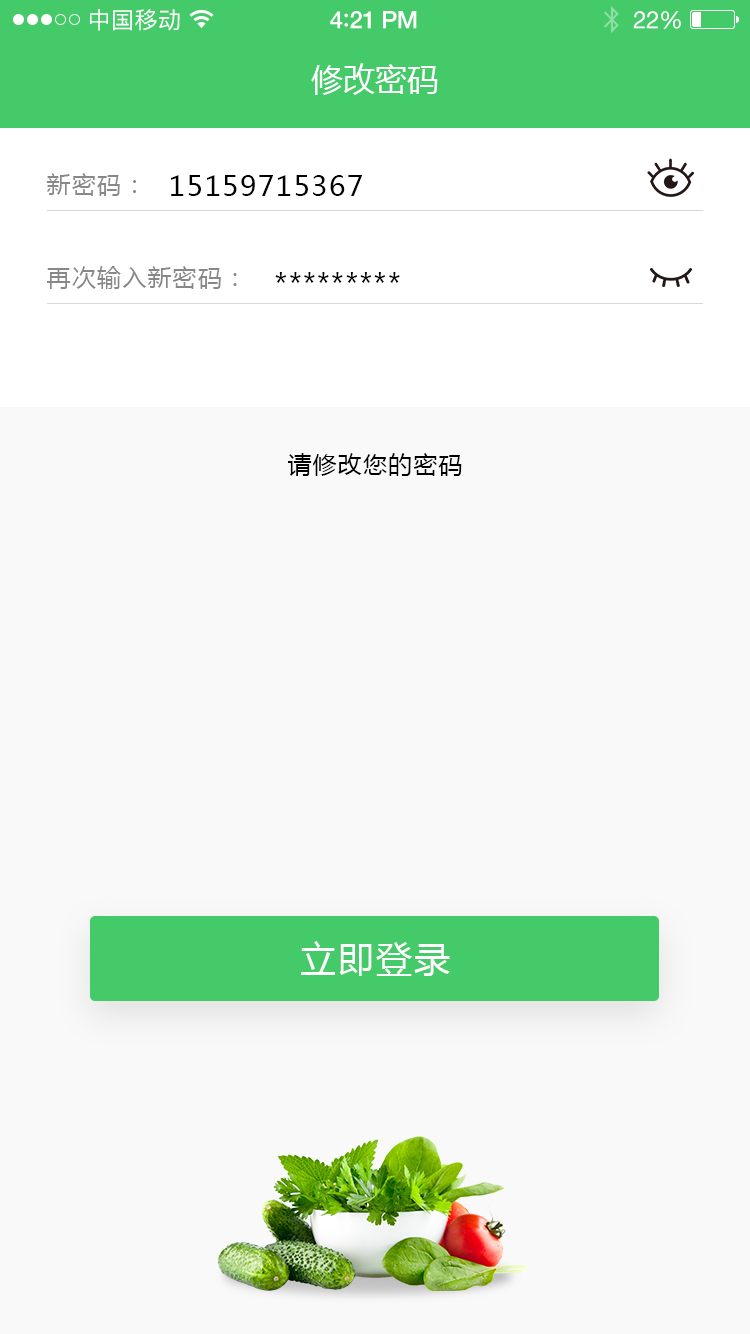
<style>
.page{position:relative;width:750px;height:1334px;background:#f9f9f9}
.page>*{position:absolute;margin:0}
.t1{font:23px "PingFangSC-Regular";letter-spacing:0.02em;color:#ffffff}
.t2{font:24px "HelveticaNeue-Medium";letter-spacing:-0.02em;color:#ffffff}
.t3{font:26px "Avenir-Medium";letter-spacing:-0.02em;color:#ffffff}
.t4{font:24px "HelveticaNeue";letter-spacing:-0.02em;color:#ffffff}
.t5{font:32px "MicrosoftYaHei";color:#ffffff;text-transform:uppercase}
.t6{font:24px "MicrosoftYaHei";letter-spacing:0.05em;color:#888888;text-transform:uppercase}
.t7{font:28px "MicrosoftYaHei";letter-spacing:0.05em;color:#010101;text-transform:uppercase}
.t8{font:24px "MicrosoftYaHei";letter-spacing:0.05em;color:#000000;text-transform:uppercase}
.t9{font:36px "MicrosoftYaHei";letter-spacing:0.06em;color:#ffffff;text-transform:uppercase}
</style>
<div class="page">
<p class="t1" style="left:90px;top:9px;width:90px;height:22px">中国移动</p>
<p class="t2" style="left:330px;top:11px;width:87px;height:18px">4<span class="t3">:</span>21 PM</p>
<p class="t4" style="left:633px;top:11px;width:48px;height:18px">22%</p>
<p class="t5" style="left:311px;top:63px;width:127px;height:32px">修改密码</p>
<p class="t6" style="left:46px;top:173px;width:90px;height:23px">新密码：</p>
<p class="t7" style="left:171px;top:175px;width:191px;height:21px">15159715367</p>
<p class="t6" style="left:47px;top:266px;width:190px;height:23px">再次输入新密码：</p>
<p class="t7" style="left:275px;top:272px;width:125px;height:11px">*********</p>
<p class="t8" style="left:288px;top:453px;width:174px;height:23px">请修改您的密码</p>
<p class="t9" style="left:301px;top:941px;width:149px;height:35px">立即登录</p>
</div>
